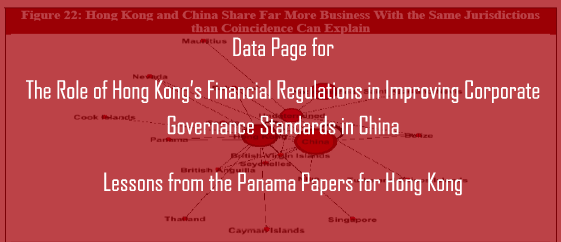
<style>
.page{position:relative;width:561px;height:242px;background:#bc4247}
.page>*{position:absolute;margin:0}
.t1{font:24px/7.1px "AgencyFB-Reg";letter-spacing:-0.005em;color:#ffffff}
</style>
<div class="page">
<p class="t1" style="left:26px;top:37px;width:514px;height:159px;text-align:center">Data Page for<br><br><br><br><br> <br>The Role of Hong Kong’s Financial Regulations in Improving Corporate <br><br><br><br><br>Governance Standards in China<br><br><br><br><br><br><br><br>Lessons from the Panama Papers for Hong Kong</p>
</div>
